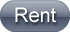
<style>
.page{position:relative;width:70px;height:32px}
.page>*{position:absolute;margin:0}
.t1{font:20px "ArialMT";color:#ffffff}
</style>
<div class="page">
<p class="t1" style="left:14px;top:5px;width:42px;height:23px">Rent</p>
</div>
